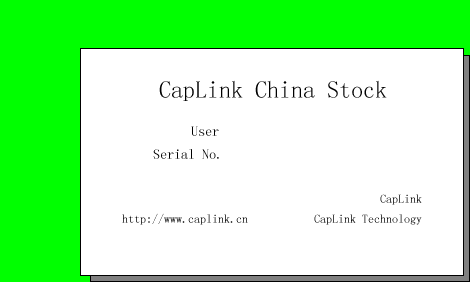
<style>
.page{position:relative;width:470px;height:282px;background:#ffffff}
.page>*{position:absolute;margin:0}
.t1{font:24px "SimSun";color:#000000}
.t2{font:14px "SimSun";color:#000000}
.t3{font:12px "SimSun";color:#000000}
.t4{font:12px "SimSun"}
</style>
<div class="page">
<p class="t1" style="left:159px;top:80px;width:228px;height:21px">CapLink China Stock</p>
<p class="t2" style="left:191px;top:126px;width:28px;height:10px">User</p>
<p class="t2" style="left:153px;top:149px;width:66px;height:10px">Serial No.</p>
<p class="t3" style="left:380px;top:194px;width:42px;height:11px">CapLink</p>
<p class="t4" style="left:122px;top:213px;width:300px;height:12px">http://www.caplink.cn           CapLink Technology</p>
</div>
